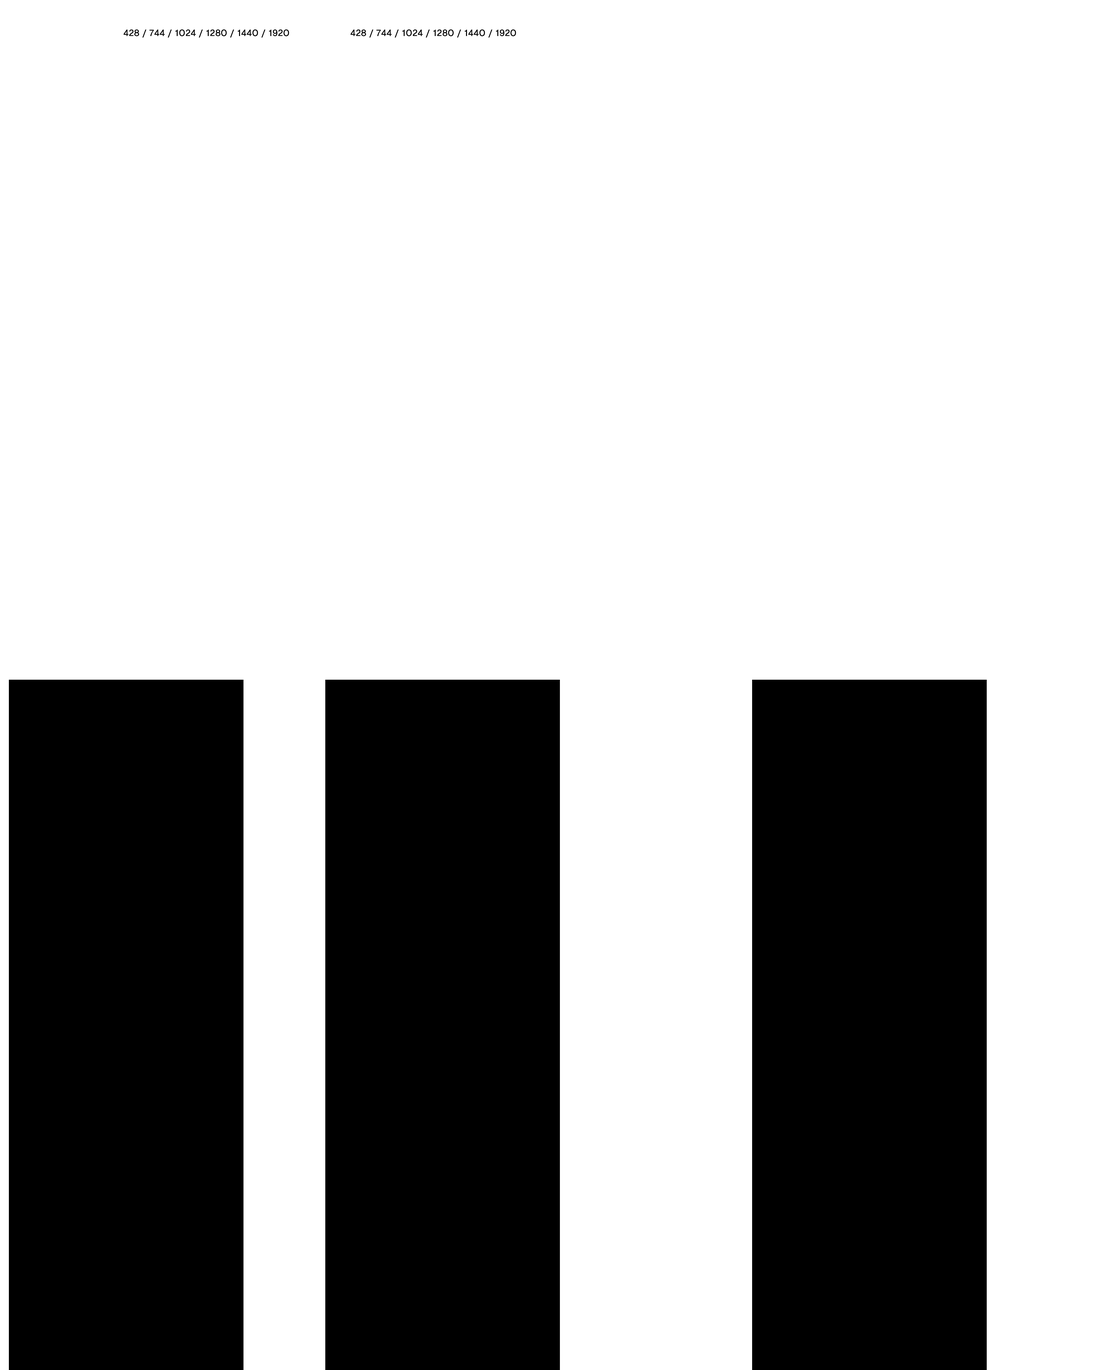
<style>
.page{position:relative;width:1106px;height:1370px;background:#ffffff}
.page>*{position:absolute;margin:0}
.t1{font:9px "HaanYGodic24";letter-spacing:-0.025em;color:#000000}
</style>
<div class="page">
<p class="t1" style="left:124px;top:29px;width:165px;height:9px">428 / 744 / 1024 / 1280 / 1440 / 1920</p>
<p class="t1" style="left:351px;top:29px;width:165px;height:9px">428 / 744 / 1024 / 1280 / 1440 / 1920</p>
</div>
